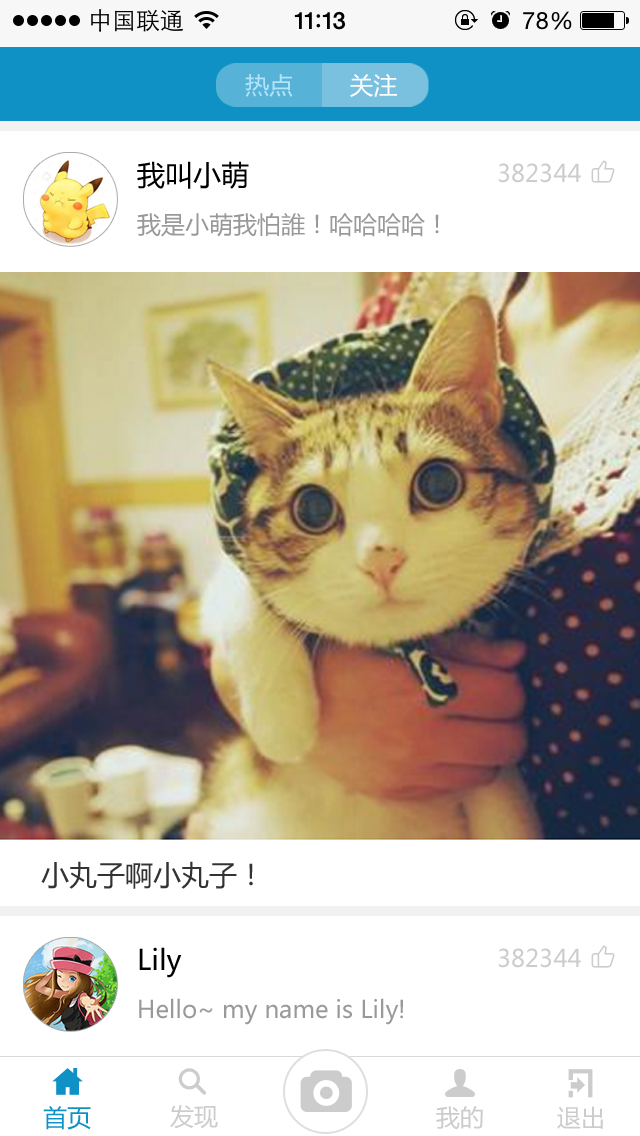
<style>
.page{position:relative;width:640px;height:1136px;background:#ffffff}
.page>*{position:absolute;margin:0}
.t1{font:24px "MicrosoftYaHei";color:#b1e4f8}
.t2{font:24px "MicrosoftYaHei";color:#ffffff}
.t3{font:28px "MicrosoftYaHei";color:#000000}
.t4{font:24px "MicrosoftYaHei";color:#cccccc}
.t5{font:24px "MicrosoftYaHei";color:#999999}
.t6{font:28px "MicrosoftYaHei";color:#333333}
.t7{font:24px "MicrosoftYaHei";color:#0f91c5}
</style>
<div class="page">
<p class="t1" style="left:245px;top:73px;width:152px;height:24px">热点<span class="t2">        关注</span></p>
<p class="t3" style="left:137px;top:161px;width:112px;height:28px">我叫小萌</p>
<p class="t4" style="left:498px;top:163px;width:83px;height:20px">382344</p>
<p class="t5" style="left:137px;top:213px;width:302px;height:24px">我是小萌我怕誰！哈哈哈哈！</p>
<p class="t6" style="left:41px;top:861px;width:212px;height:28px">小丸子啊小丸子！</p>
<p class="t3" style="left:139px;top:947px;width:43px;height:31px">Lily</p>
<p class="t4" style="left:498px;top:948px;width:83px;height:20px">382344</p>
<p class="t5" style="left:139px;top:998px;width:264px;height:27px">Hello~ my name is Lily!</p>
<p class="t7" style="left:43px;top:1106px;width:48px;height:24px">首页</p>
<p class="t4" style="left:170px;top:1105px;width:48px;height:24px">发现</p>
<p class="t4" style="left:436px;top:1106px;width:47px;height:23px">我的</p>
<p class="t4" style="left:557px;top:1106px;width:46px;height:23px">退出</p>
</div>
